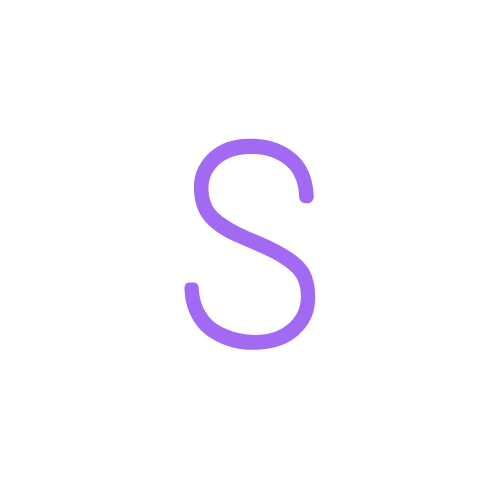
<style>
.page{position:relative;width:500px;height:500px;background:#ffffff}
.page>*{position:absolute;margin:0}
.t1{font:300px "TextMeOne-Regular";color:#a26af3;text-transform:uppercase;scale:0.95 1}
</style>
<div class="page">
<p class="t1" style="left:184px;top:138px;width:132px;height:212px">S</p>
</div>
